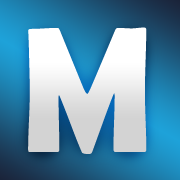
<style>
.page{position:relative;width:180px;height:180px}
.page>*{position:absolute;margin:0}
.t1{font:180px "BerlinSansFBDemi-Bold";letter-spacing:-0.075em;color:#e7e7e7;scale:0.9 1}
</style>
<div class="page">
<p class="t1" style="left:28px;top:27px;width:119px;height:127px">M</p>
</div>
